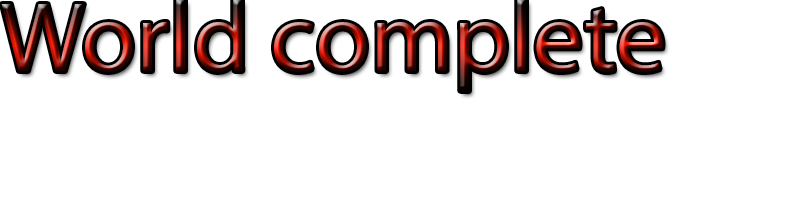
<style>
.page{position:relative;width:800px;height:200px;background:#ffffff}
.page>*{position:absolute;margin:0}
.t1{font:100px "MyriadPro-Regular"}
</style>
<div class="page">
<p class="t1" style="left:1px;top:0px;width:662px;height:91px">World complete</p>
</div>
